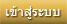
<style>
.page{position:relative;width:67px;height:24px}
.page>*{position:absolute;margin:0}
.t1{font:13.3px "Tahoma";color:#ffffff;text-transform:uppercase}
</style>
<div class="page">
<p class="t1" style="left:5px;top:6px;width:55px;height:13px">เข้าสู่ระบบ</p>
</div>
